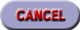
<style>
.page{position:relative;width:80px;height:30px;background:#a0a0c8}
.page>*{position:absolute;margin:0}
.t1{font:14px "GothicXB-HM"}
</style>
<div class="page">
<p class="t1" style="left:16px;top:9px;width:49px;height:12px">CANCEL</p>
</div>
